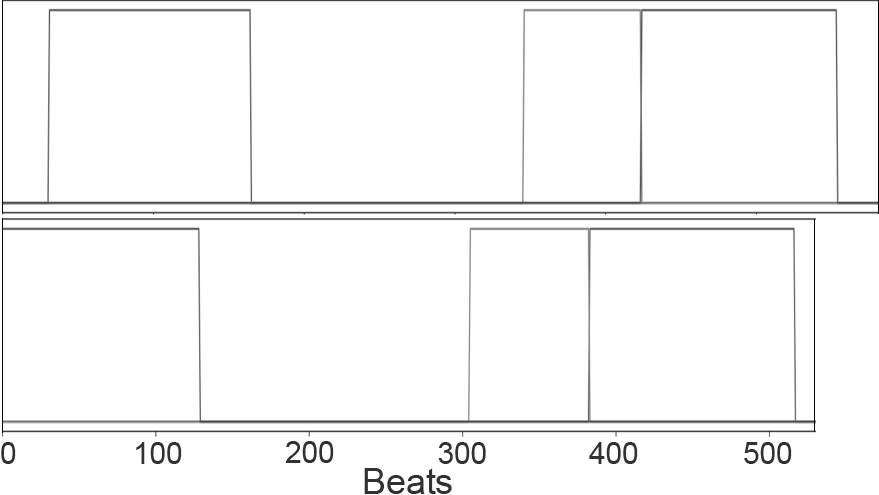
<style>
.page{position:relative;width:879px;height:495px;background:#ffffff}
.page>*{position:absolute;margin:0}
.t1{font:29.7px "ArialMT";color:#313131}
.t2{font:35.6px "ArialMT";color:#313131}
</style>
<div class="page">
<p class="t1" style="left:1px;top:442px;width:15px;height:22px">0</p>
<p class="t1" style="left:136px;top:442px;width:46px;height:22px">100</p>
<p class="t1" style="left:285px;top:441px;width:49px;height:22px">200</p>
<p class="t1" style="left:438px;top:442px;width:48px;height:22px">300</p>
<p class="t1" style="left:589px;top:442px;width:49px;height:22px">400</p>
<p class="t1" style="left:744px;top:442px;width:48px;height:22px">500</p>
<p class="t2" style="left:364px;top:468px;width:88px;height:26px">Beats</p>
</div>
